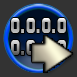
<style>
.page{position:relative;width:77px;height:77px;background:#333333}
.page>*{position:absolute;margin:0}
.t1{font:18.4px "RedCircle";scale:0.75 1}
</style>
<div class="page">
<p class="t1" style="left:11px;top:18px;width:55px;height:37px;text-align:center">0.0.0.0<br>0.0.0.0</p>
</div>
